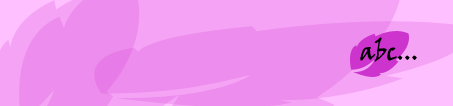
<style>
.page{position:relative;width:453px;height:106px;background:#ed8ded}
.page>*{position:absolute;margin:0}
.t1{font:24px "VinerHandITC";color:#000000}
</style>
<div class="page">
<p class="t1" style="left:360px;top:37px;width:57px;height:25px">abc...</p>
</div>
